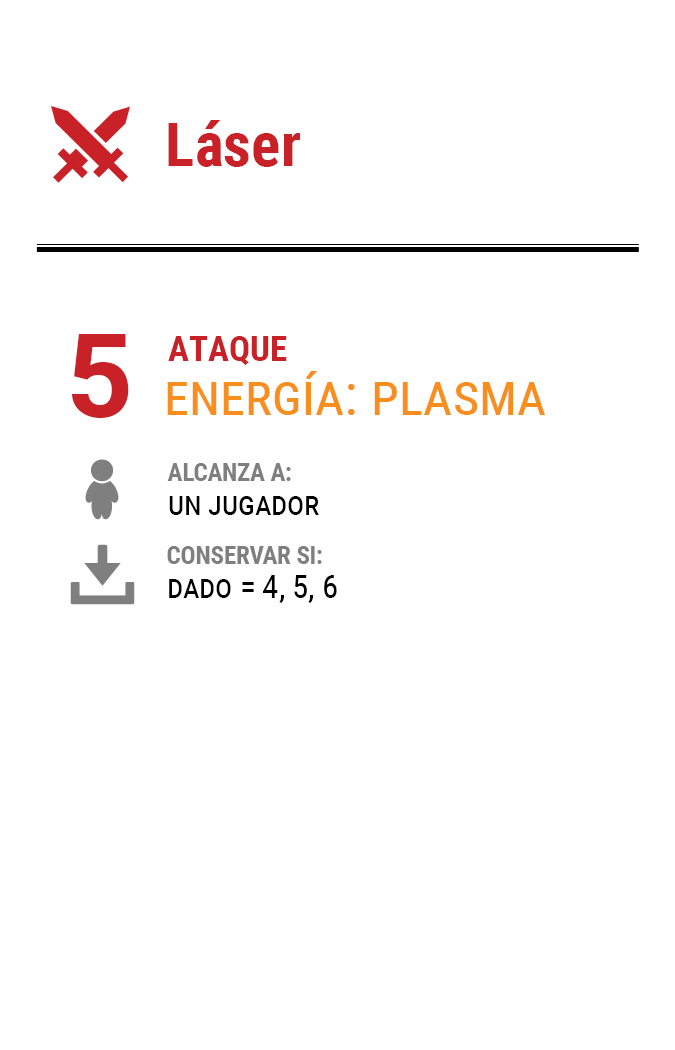
<style>
.page{position:relative;width:675px;height:1050px;background:#ffffff}
.page>*{position:absolute;margin:0}
.t1{font:61.2px "RobotoCondensed-Bold";color:#c82127}
.t2{font:116.7px "Roboto-Bold";letter-spacing:-0.16em;color:#c82127}
.t3{font:35px "RobotoCondensed-Bold";color:#c82127}
.t4{font:58.3px "RobotoCondensed-Regular";color:#f78e1e;font-variant:small-caps}
.t5{font:25px/33.3px "RobotoCondensed-Bold";letter-spacing:-0.01em;color:#7f7f7f}
.t6{font:33.3px/33.3px "RobotoCondensed-Regular";letter-spacing:-0.01em;color:#000000;font-variant:small-caps}
</style>
<div class="page">
<p class="t1" style="left:168px;top:120px;width:133px;height:47px">Láser</p>
<p class="t2" style="left:72px;top:334px;width:57px;height:84px">5</p>
<p class="t3" style="left:168px;top:336px;width:119px;height:29px">ATAQUE</p>
<p class="t4" style="left:167px;top:371px;width:379px;height:44px">energía: plasma</p>
<p class="t5" style="left:167px;top:463px;width:152px;height:52px">ALCANZA A:<br><span class="t6">un jugador</span></p>
<p class="t6" style="left:167px;top:546px;width:170px;height:57px"><span class="t5">CONSERVAR SI:<br></span>dado = 4, 5, 6</p>
</div>
